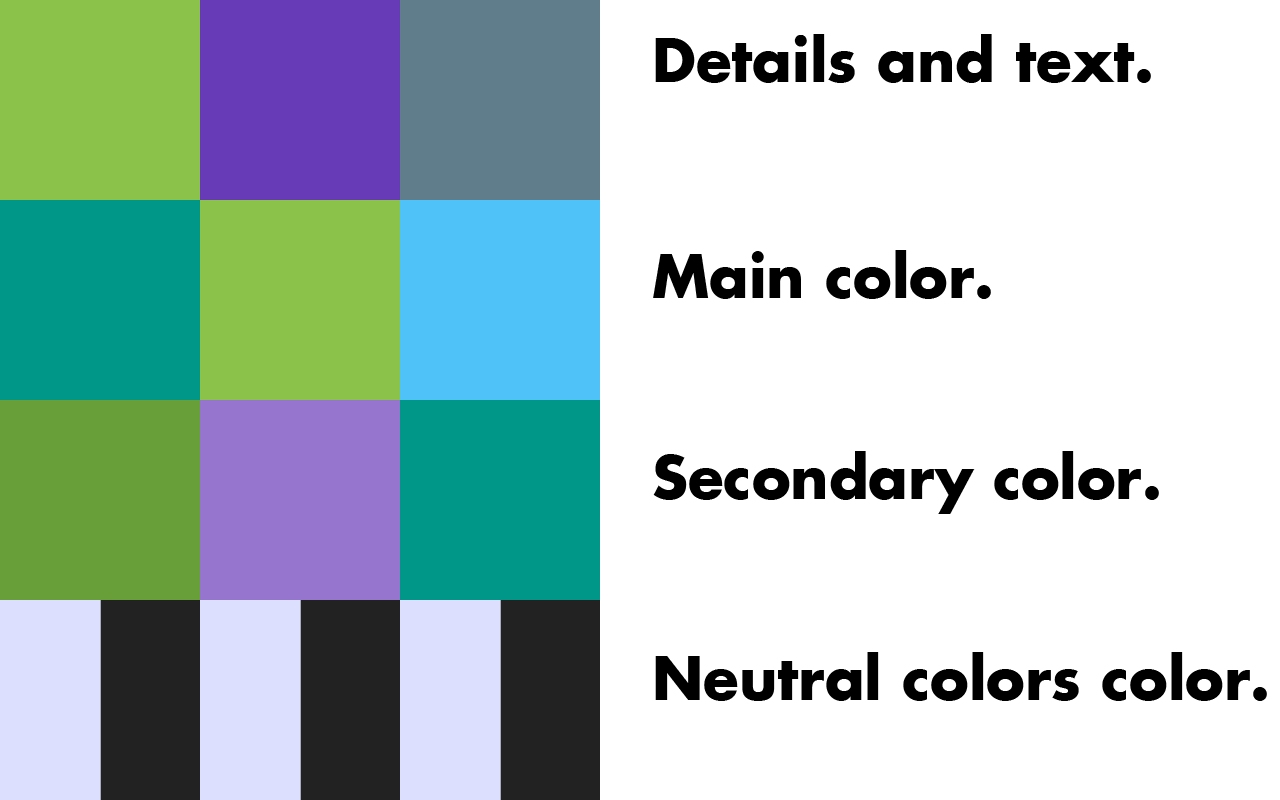
<style>
.page{position:relative;width:1280px;height:800px;background:#ffffff}
.page>*{position:absolute;margin:0}
.t1{font:58.2px "FuturaKoyu";color:#000000}
.t2{font:57.8px "FuturaKoyu";color:#000000}
</style>
<div class="page">
<p class="t1" style="left:655px;top:34px;width:496px;height:49px">Details and text.</p>
<p class="t2" style="left:653px;top:250px;width:338px;height:49px">Main color.</p>
<p class="t1" style="left:653px;top:451px;width:506px;height:63px">Secondary color.</p>
<p class="t1" style="left:655px;top:652px;width:612px;height:49px">Neutral colors color.</p>
</div>
